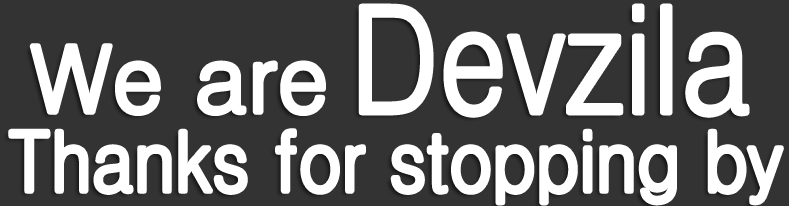
<style>
.page{position:relative;width:789px;height:206px;background:#333333}
.page>*{position:absolute;margin:0}
.t1{font:148px "Dotum";color:#ffffff;scale:0.83 1}
.t2{font:92px "Dotum";color:#ffffff}
.t3{font:83px "Dotum";color:#ffffff;scale:0.87 1}
.t4{font:72.4px "Dotum";color:#ffffff;scale:0.87 1}
</style>
<div class="page">
<p class="t1" style="left:361px;top:6px;width:386px;height:110px">Devzila</p>
<p class="t2" style="left:32px;top:45px;width:292px;height:69px">We are</p>
<p class="t3" style="left:10px;top:130px;width:772px;height:73px"><span class="t4">  <br></span>Thanks for stopping by</p>
</div>
